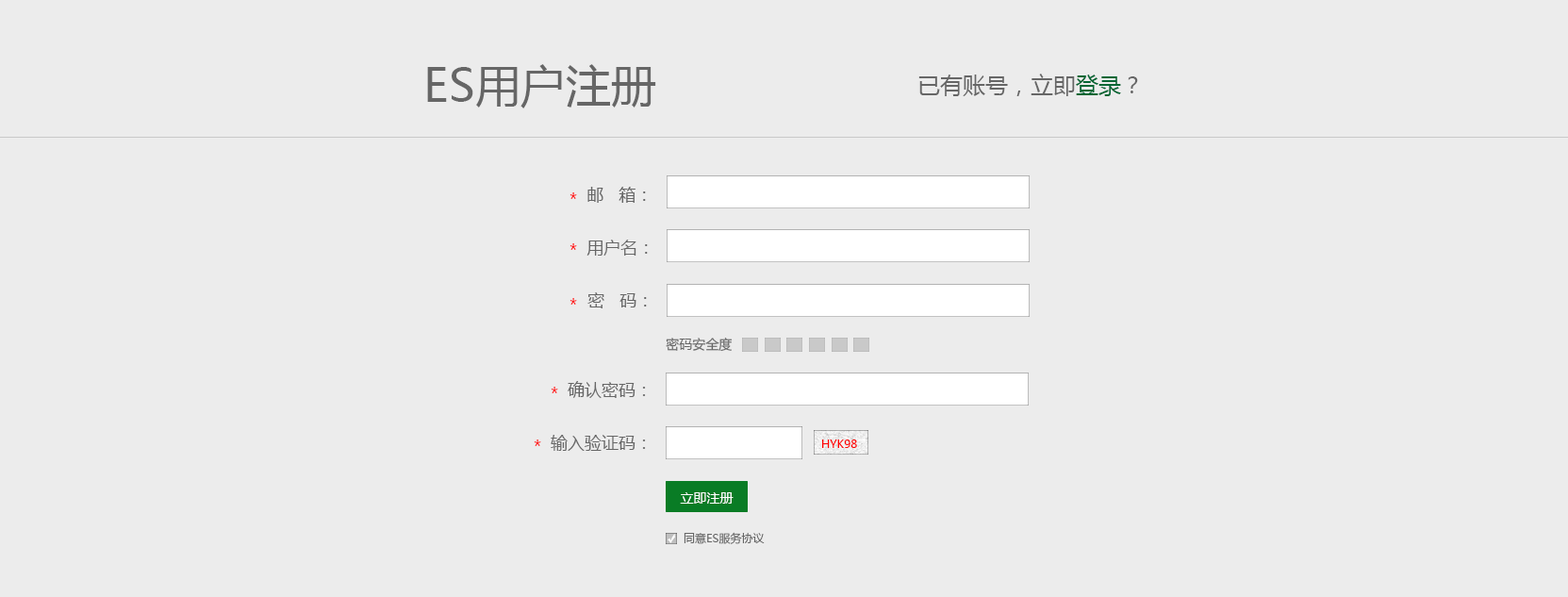
<style>
.page{position:relative;width:1568px;height:597px;background:#ececec}
.page>*{position:absolute;margin:0}
.t1{font:45.3px "MicrosoftYaHei";color:#666666}
.t2{font:22.6px "MicrosoftYaHei";color:#666666}
.t3{font:22.6px "MicrosoftYaHei";color:#006633}
.t4{font:17px "MicrosoftYaHei";color:#ff0000}
.t5{font:17px "MicrosoftYaHei";color:#666666}
.t6{font:13.2px "MicrosoftYaHei";color:#666666}
.t7{font:11.3px "MicrosoftYaHei";color:#ff0000}
.t8{font:13.2px "MicrosoftYaHei";color:#ffffff}
.t9{font:11.3px "MicrosoftYaHei";color:#666666}
</style>
<div class="page">
<p class="t1" style="left:427px;top:64px;width:229px;height:44px">ES用户注册</p>
<p class="t2" style="left:918px;top:74px;width:220px;height:22px">已有账号，立即<span class="t3">登录</span>？</p>
<p class="t4" style="left:569px;top:192px;width:8px;height:7px">*</p>
<p class="t5" style="left:587px;top:187px;width:59px;height:16px">邮   箱：</p>
<p class="t4" style="left:569px;top:243px;width:8px;height:7px">*</p>
<p class="t5" style="left:586px;top:239px;width:62px;height:17px">用户名：</p>
<p class="t5" style="left:587px;top:292px;width:60px;height:16px">密   码：</p>
<p class="t4" style="left:569px;top:298px;width:8px;height:7px">*</p>
<p class="t6" style="left:666px;top:338px;width:67px;height:14px">密码安全度</p>
<p class="t4" style="left:551px;top:387px;width:7px;height:6px">*</p>
<p class="t5" style="left:568px;top:381px;width:78px;height:17px">确认密码：</p>
<p class="t5" style="left:551px;top:435px;width:95px;height:16px">输入验证码：</p>
<p class="t4" style="left:534px;top:439px;width:7px;height:7px">*</p>
<p class="t7" style="left:822px;top:439px;width:35px;height:9px">HYK98</p>
<p class="t8" style="left:680px;top:492px;width:54px;height:11px">立即注册</p>
<p class="t9" style="left:684px;top:532px;width:81px;height:12px">同意ES服务协议</p>
</div>
